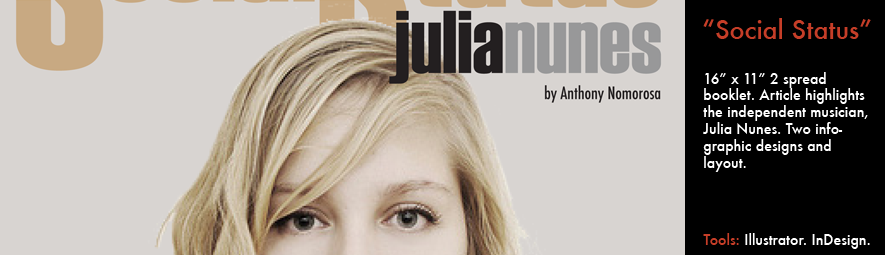
<style>
.page{position:relative;width:885px;height:255px;background:#d8d4d1}
.page>*{position:absolute;margin:0}
.t1{font:25px "Futura-Medium";color:#c63e28}
.t2{font:14px "Futura-Medium";color:#ffffff}
.t3{font:14px "Futura-Medium";color:#c63e28}
</style>
<div class="page">
<p class="t1" style="left:703px;top:18px;width:168px;height:21px">“Social Status”</p>
<p class="t2" style="left:703px;top:72px;width:165px;height:100px">16” x 11” 2 spread<br>booklet. Article highlights the independent musician, Julia Nunes. Two infographic designs and layout.</p>
<p class="t2" style="left:703px;top:233px;width:167px;height:16px"><span class="t3">Tools: </span>Illustrator. InDesign.</p>
</div>
